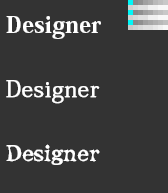
<style>
.page{position:relative;width:168px;height:193px;background:#333333}
.page>*{position:absolute;margin:0}
.t1{font:22px/64px "KozMinPro-Heavy";letter-spacing:0.022em;color:#ffffff}
.t2{font:22px/64px "AdobeFangsongStd-Regular";letter-spacing:0.028em;color:#ffffff;font-weight:bold}
.t3{font:22px/64px "ComicMysteryStd-DB";letter-spacing:-0.006em;color:#ffffff}
</style>
<div class="page">
<p class="t1" style="left:6px;top:16px;width:95px;height:149px">Designer<br><span class="t2">Designer<br></span><span class="t3">Designer</span></p>
</div>
